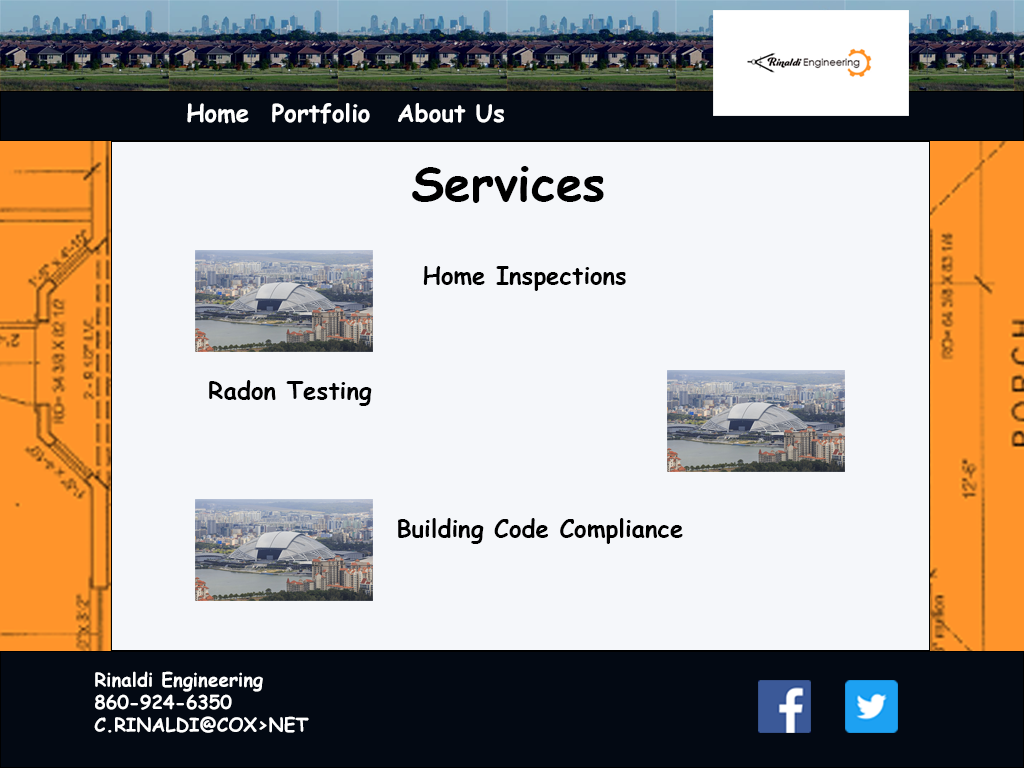
<style>
.page{position:relative;width:1024px;height:768px;background:#f5f7fa}
.page>*{position:absolute;margin:0}
.t1{font:24px "ComicSansMS-Bold";color:#ffffff}
.t2{font:48px "ComicSansMS-Bold";color:#000000}
.t3{font:24px "ComicSansMS-Bold";color:#000000}
.t4{font:18.8px "ComicSansMS-Bold";color:#ffffff}
</style>
<div class="page">
<p class="t1" style="left:187px;top:103px;width:62px;height:21px">Home</p>
<p class="t1" style="left:272px;top:103px;width:98px;height:21px">Portfolio</p>
<p class="t1" style="left:398px;top:103px;width:106px;height:20px">About Us</p>
<p class="t2" style="left:412px;top:166px;width:192px;height:37px">Services</p>
<p class="t3" style="left:423px;top:266px;width:203px;height:25px">Home Inspections</p>
<p class="t3" style="left:209px;top:380px;width:163px;height:26px">Radon Testing</p>
<p class="t3" style="left:398px;top:518px;width:285px;height:26px">Building Code Compliance</p>
<p class="t4" style="left:94px;top:671px;width:215px;height:62px">Rinaldi Engineering<br>860-924-6350<br>C.RINALDI@COX&gt;NET</p>
</div>
